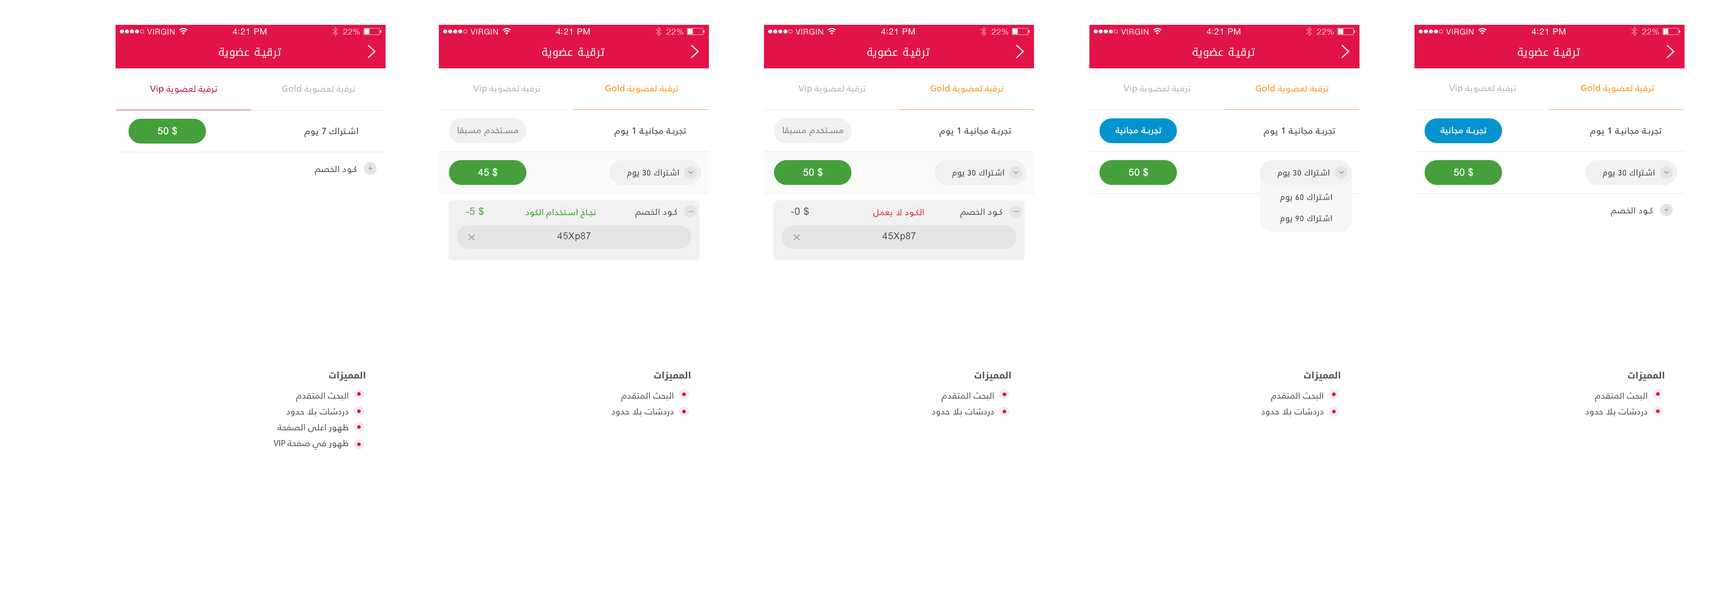
<style>
.page{position:relative;width:1727px;height:608px;background:#ffffff}
.page>*{position:absolute;margin:0}
.t1{font:10.8px "DroidArabicKufi";letter-spacing:0.029em;color:#ffffff}
.t2{font:9px "FrutigerLTArabic-55Roman";color:#be0137}
.t3{font:9px "FrutigerLTArabic-55Roman";color:#b5b5b5}
.t4{font:9px "FrutigerLTArabic-55Roman";color:#f89724}
.t5{font:9.7px "ArialMT";letter-spacing:0.029em;color:#ffffff}
.t6{font:9px "FrutigerLTArabic-55Roman";letter-spacing:0.029em;color:#4a4a4a}
.t7{font:9px "FrutigerLTArabic-55Roman";letter-spacing:0.029em;color:#898989}
.t8{font:9px "FrutigerLTArabic-55Roman";letter-spacing:0.029em;color:#ffffff}
.t9{font:8.6px "MyriadPro-Regular";letter-spacing:0.029em;color:#939393}
.t10{font:7.9px "DroidArabicKufi";letter-spacing:0.029em;color:#4a4a4a}
.t11{font:7.9px "DINNextLTW23-Regular";letter-spacing:0.029em;color:#4a4a4a}
.t12{font:9.7px "ArialMT";letter-spacing:0.029em;color:#fefefe}
.t13{font:10.1px "ArialMT";letter-spacing:0.029em;color:#45a03b}
.t14{font:8.6px "FrutigerLTArabic-55Roman";letter-spacing:0.029em;color:#45a03b}
.t15{font:10.1px "ArialMT";letter-spacing:0.029em;color:#4a4a4a}
.t16{font:8.6px "FrutigerLTArabic-55Roman";letter-spacing:0.029em;color:#e51a1a}
.t17{font:8.6px "MyriadPro-Regular";letter-spacing:0.029em;color:#939393;scale:2.06 1}
.t18{font:9.4px "ArialMT";letter-spacing:0.029em;color:#4a4a4a}
.t19{font:9px/15.8px "FrutigerLTArabic-55Roman";color:#525252}
.t20{font:9px "DroidArabicKufi-Bold";color:#525252}
.t21{font:9px/10.1px "FrutigerLTArabic-55Roman";color:#525252}
.t22{font:9px/15.8px "MyriadPro-Regular";color:#525252}
</style>
<div class="page">
<p class="t1" style="left:219px;top:48px;width:62px;height:10px">ترقية عضوية</p>
<p class="t1" style="left:542px;top:48px;width:62px;height:10px">ترقية عضوية</p>
<p class="t1" style="left:867px;top:48px;width:63px;height:10px">ترقية عضوية</p>
<p class="t1" style="left:1193px;top:48px;width:62px;height:10px">ترقية عضوية</p>
<p class="t1" style="left:1518px;top:48px;width:62px;height:10px">ترقية عضوية</p>
<p class="t2" style="left:150px;top:85px;width:67px;height:9px">Vip ترقية لعضوية</p>
<p class="t3" style="left:282px;top:85px;width:73px;height:9px">Gold ترقية لعضوية</p>
<p class="t3" style="left:473px;top:85px;width:68px;height:8px">Vip ترقية لعضوية</p>
<p class="t4" style="left:605px;top:85px;width:74px;height:8px">Gold ترقية لعضوية</p>
<p class="t3" style="left:798px;top:85px;width:68px;height:8px">Vip ترقية لعضوية</p>
<p class="t4" style="left:930px;top:85px;width:74px;height:8px">Gold ترقية لعضوية</p>
<p class="t3" style="left:1123px;top:85px;width:68px;height:8px">Vip ترقية لعضوية</p>
<p class="t4" style="left:1255px;top:85px;width:74px;height:8px">Gold ترقية لعضوية</p>
<p class="t3" style="left:1449px;top:85px;width:67px;height:8px">Vip ترقية لعضوية</p>
<p class="t4" style="left:1581px;top:84px;width:73px;height:9px">Gold ترقية لعضوية</p>
<p class="t5" style="left:158px;top:126px;width:19px;height:9px">50 $</p>
<p class="t6" style="left:304px;top:127px;width:54px;height:11px">اشتراك 7 يوم</p>
<p class="t7" style="left:458px;top:127px;width:60px;height:10px">مستخدم مسبقا</p>
<p class="t6" style="left:614px;top:127px;width:72px;height:10px">تجربة مجانية 1 يوم</p>
<p class="t7" style="left:783px;top:127px;width:60px;height:10px">مستخدم مسبقا</p>
<p class="t6" style="left:939px;top:127px;width:72px;height:10px">تجربة مجانية 1 يوم</p>
<p class="t8" style="left:1115px;top:127px;width:46px;height:8px">تجربة مجانية</p>
<p class="t6" style="left:1264px;top:127px;width:71px;height:10px">تجربة مجانية 1 يوم</p>
<p class="t8" style="left:1440px;top:127px;width:46px;height:8px">تجربة مجانية</p>
<p class="t6" style="left:1590px;top:127px;width:72px;height:10px">تجربة مجانية 1 يوم</p>
<p class="t6" style="left:315px;top:166px;width:41px;height:9px">كود الخصم</p>
<p class="t9" style="left:368px;top:166px;width:5px;height:5px">+</p>
<p class="t5" style="left:478px;top:168px;width:20px;height:9px">45 $</p>
<p class="t10" style="left:627px;top:169px;width:52px;height:9px">اشتراك <span class="t11">30</span> يوم</p>
<p class="t5" style="left:803px;top:168px;width:20px;height:9px">50 $</p>
<p class="t10" style="left:952px;top:169px;width:52px;height:9px">اشتراك <span class="t11">30</span> يوم</p>
<p class="t12" style="left:1129px;top:168px;width:19px;height:9px">50 $</p>
<p class="t10" style="left:1278px;top:169px;width:51px;height:9px">اشتراك <span class="t11">30</span> يوم</p>
<p class="t5" style="left:1454px;top:168px;width:19px;height:9px">50 $</p>
<p class="t10" style="left:1603px;top:169px;width:52px;height:9px">اشتراك <span class="t11">30</span> يوم</p>
<p class="t10" style="left:1280px;top:193px;width:52px;height:10px">اشتراك <span class="t11">60</span> يوم</p>
<p class="t13" style="left:466px;top:207px;width:18px;height:9px">-5 $</p>
<p class="t14" style="left:526px;top:209px;width:69px;height:10px">نجاح استخدام الكود</p>
<p class="t6" style="left:635px;top:209px;width:42px;height:9px">كود الخصم</p>
<p class="t15" style="left:791px;top:207px;width:18px;height:9px">-0 $</p>
<p class="t16" style="left:873px;top:209px;width:51px;height:8px">الكود لا يعمل</p>
<p class="t6" style="left:960px;top:209px;width:42px;height:9px">كود الخصم</p>
<p class="t6" style="left:1611px;top:207px;width:41px;height:10px">كود الخصم</p>
<p class="t9" style="left:1664px;top:207px;width:5px;height:5px">+</p>
<p class="t17" style="left:689px;top:211px;width:4px;height:1px">-</p>
<p class="t17" style="left:1014px;top:211px;width:4px;height:1px">-</p>
<p class="t10" style="left:1280px;top:215px;width:52px;height:9px">اشتراك <span class="t11">90</span> يوم</p>
<p class="t18" style="left:557px;top:233px;width:34px;height:8px">45Xp87</p>
<p class="t18" style="left:882px;top:233px;width:34px;height:8px">45Xp87</p>
<p class="t19" style="left:274px;top:372px;width:91px;height:78px;text-align:right"><span class="t20">المميزات<br><br>    </span><span class="t21">البحث المتقدم</span><br>دردشات بلا حدود<br>ظهور اعلى الصفحة<br> <span class="t22">VIP </span>ظهور في صفحة</p>
<p class="t19" style="left:611px;top:372px;width:79px;height:45px;text-align:right"><span class="t20">المميزات<br><br>    </span><span class="t21">البحث المتقدم</span><br>دردشات بلا حدود</p>
<p class="t19" style="left:932px;top:372px;width:79px;height:45px;text-align:right"><span class="t20">المميزات<br></span><span class="t21"><br>    البحث المتقدم</span><br>دردشات بلا حدود</p>
<p class="t19" style="left:1261px;top:372px;width:79px;height:45px;text-align:right"><span class="t20">المميزات<br></span><span class="t21"><br>    البحث المتقدم</span><br>دردشات بلا حدود</p>
<p class="t19" style="left:1585px;top:372px;width:79px;height:45px;text-align:right"><span class="t20">المميزات<br><br>    </span><span class="t21">البحث المتقدم</span><br>دردشات بلا حدود</p>
</div>
